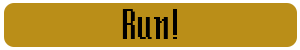
<style>
.page{position:relative;width:300px;height:50px;background:#ba8e18}
.page>*{position:absolute;margin:0}
.t1{font:42px "Bitmap";color:#000000}
</style>
<div class="page">
<p class="t1" style="left:122px;top:9px;width:55px;height:30px">Run!</p>
</div>
